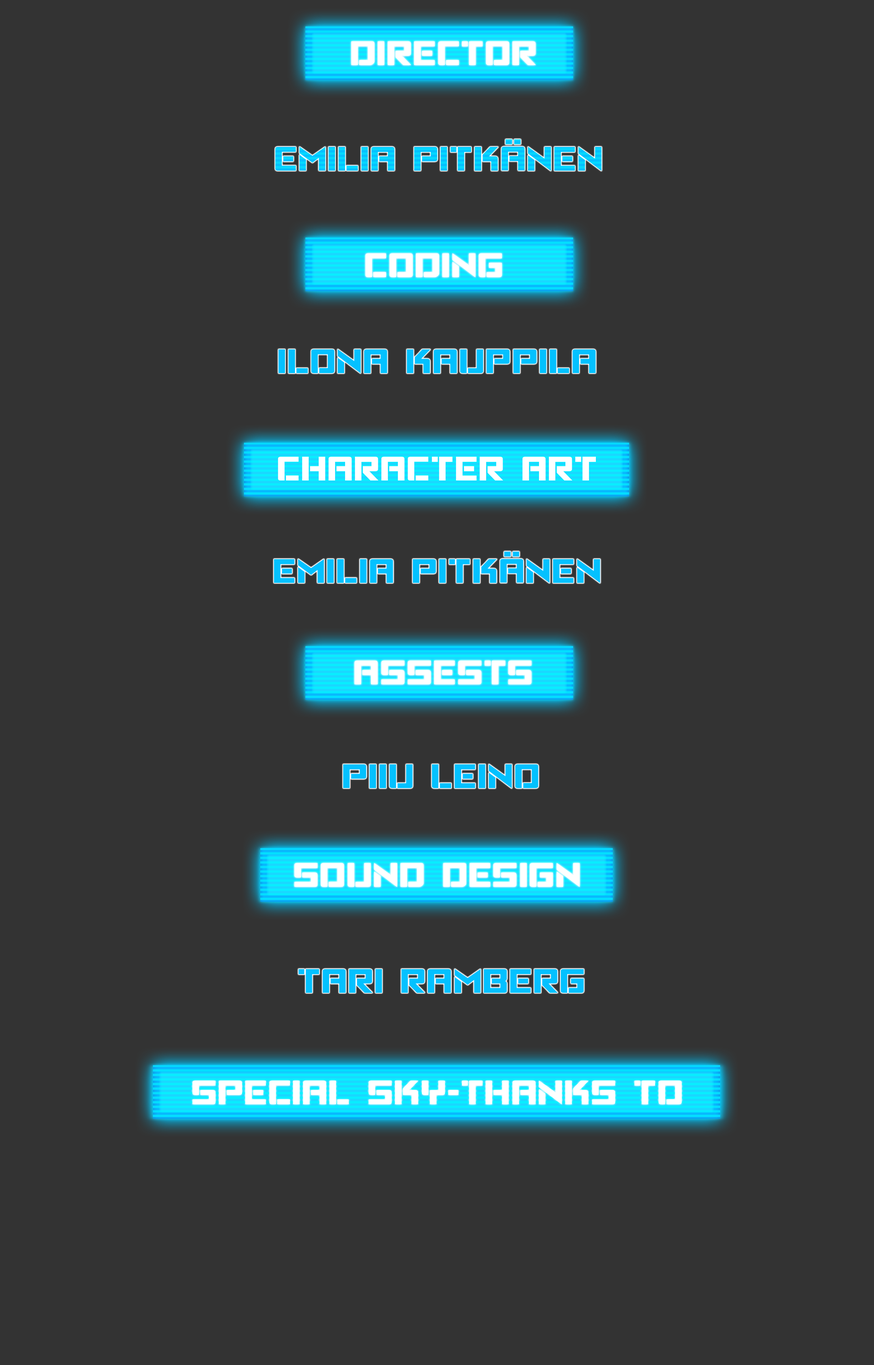
<style>
.page{position:relative;width:874px;height:1365px;background:#333333}
.page>*{position:absolute;margin:0}
.t1{font:56.9px "VikingSquad";color:#ffffff}
.t2{font:56.9px "VikingSquad";color:#03c1ff}
</style>
<div class="page">
<p class="t1" style="left:351px;top:41px;width:185px;height:24px">director</p>
<p class="t1" style="left:365px;top:253px;width:137px;height:25px">coding</p>
<p class="t1" style="left:278px;top:456px;width:318px;height:24px">character art</p>
<p class="t2" style="left:273px;top:551px;width:327px;height:32px">emilia pitkänen</p>
<p class="t1" style="left:354px;top:660px;width:177px;height:24px">assests</p>
<p class="t2" style="left:343px;top:764px;width:195px;height:25px">piiu Leino</p>
<p class="t1" style="left:294px;top:863px;width:286px;height:24px">sound design</p>
<p class="t2" style="left:298px;top:969px;width:286px;height:24px">tari ramberg</p>
<p class="t1" style="left:192px;top:1080px;width:490px;height:25px">special sky-thanks to</p>
</div>
